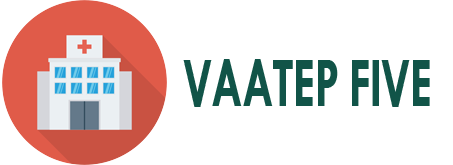
<style>
.page{position:relative;width:453px;height:165px;background:#ffffff}
.page>*{position:absolute;margin:0}
.t1{font:71.1px "TwCenMT-Bold";letter-spacing:-0.02em;color:#115448;scale:0.65 1}
</style>
<div class="page">
<p class="t1" style="left:183px;top:59px;width:247px;height:48px">VAATEP FIVE</p>
</div>
